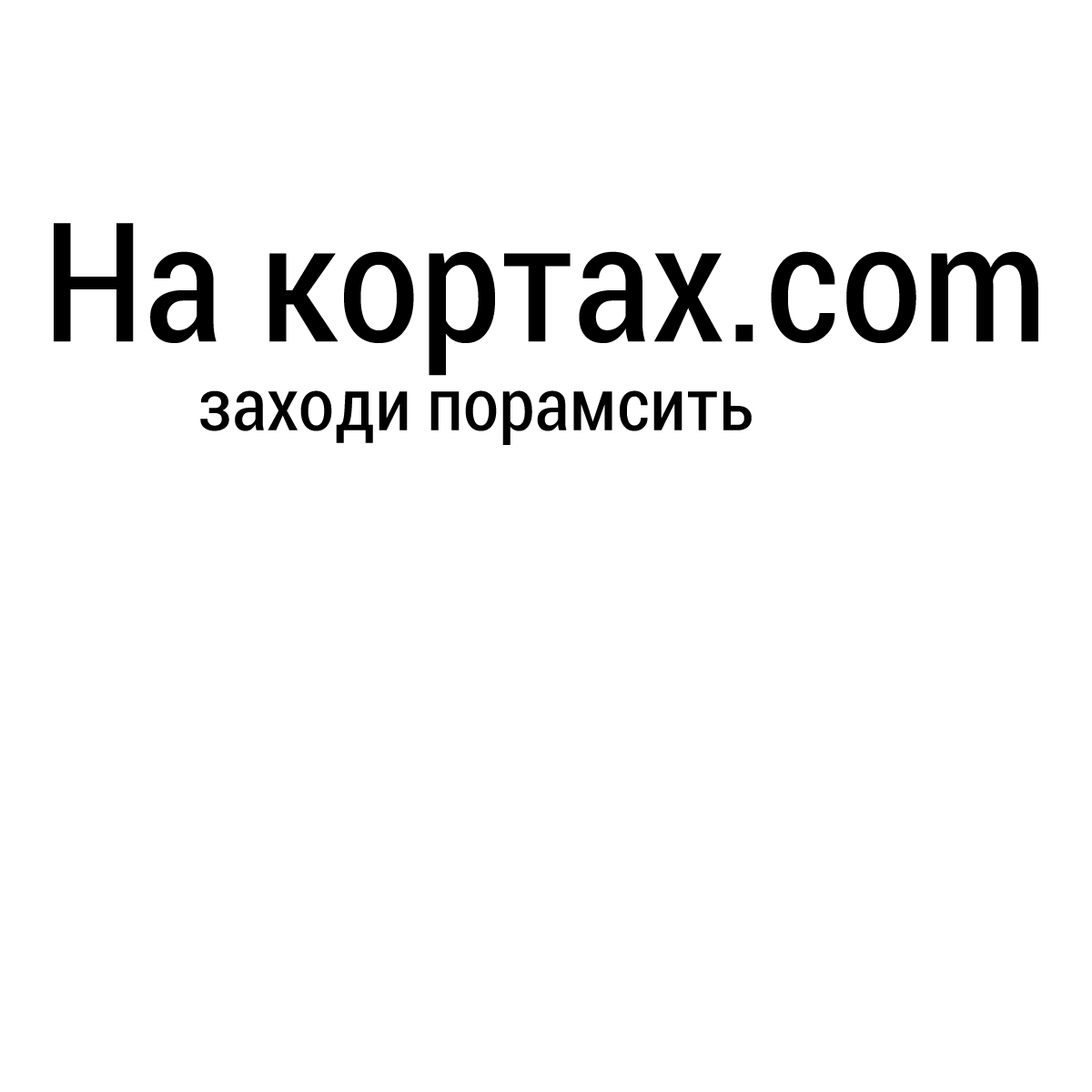
<style>
.page{position:relative;width:1092px;height:1092px;background:#ffffff}
.page>*{position:absolute;margin:0}
.t1{font:166px "Roboto-Condensed";color:#000000}
.t2{font:73px "Roboto-Condensed";color:#000000}
</style>
<div class="page">
<p class="t1" style="left:54px;top:223px;width:984px;height:153px">На кортах.com</p>
<p class="t2" style="left:200px;top:390px;width:552px;height:55px">заходи порамсить</p>
</div>
